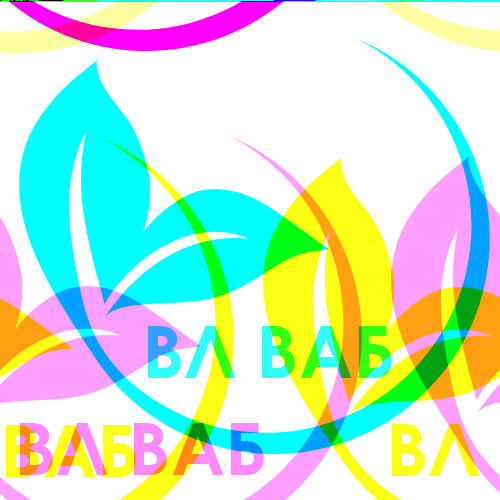
<style>
.page{position:relative;width:500px;height:500px;background:#ffffff}
.page>*{position:absolute;margin:0}
.t1{font:73.3px "CenturyGothic-Bold"}
</style>
<div class="page">
<p class="t1" style="left:148px;top:324px;width:244px;height:52px">ВЛ ВАБ</p>
</div>
